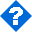
<style>
.page{position:relative;width:32px;height:32px;background:#ffffff}
.page>*{position:absolute;margin:0}
.t1{font:25px "Arial-Black";color:#ffffff}
</style>
<div class="page">
<p class="t1" style="left:9px;top:7px;width:14px;height:18px">?</p>
</div>
